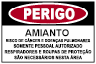
<style>
.page{position:relative;width:96px;height:64px;background:#ffffff}
.page>*{position:absolute;margin:0}
.t1{font:15.5px "Arial-Black";letter-spacing:0.005em;color:#ffffff;scale:0.78 1}
.t2{font:9.7px "Arial-BoldMT";letter-spacing:0.005em;color:#000000;scale:0.97 1}
.t3{font:4.5px/5.7px "Arial-BoldMT";letter-spacing:0.02em;color:#000000;text-transform:uppercase;scale:0.89 1}
.t4{font:4px/5.7px "Arial-BoldMT";letter-spacing:0.02em;color:#000000;text-transform:uppercase;scale:0.89 1}
.t5{font:5px/5.7px "Arial-BoldMT";letter-spacing:0.005em;color:#000000;text-transform:uppercase;scale:0.81 1}
</style>
<div class="page">
<p class="t1" style="left:24px;top:8px;width:51px;height:12px">PERIGO</p>
<p class="t2" style="left:25px;top:29px;width:44px;height:8px">AMIANTO</p>
<p class="t3" style="left:4px;top:38px;width:88px;height:22px;text-align:center"><span class="t4">RISCO DE CÂNCER E DOENÇAS PULMONARES<br></span><span class="t5">SOMENTE PESSOAL AUTORIZADO<br></span>RESPIRADORES E ROUPAS DE PROTEÇÃO<br>SÃO NECESSÁRIOS NESTA ÁREA</p>
</div>
